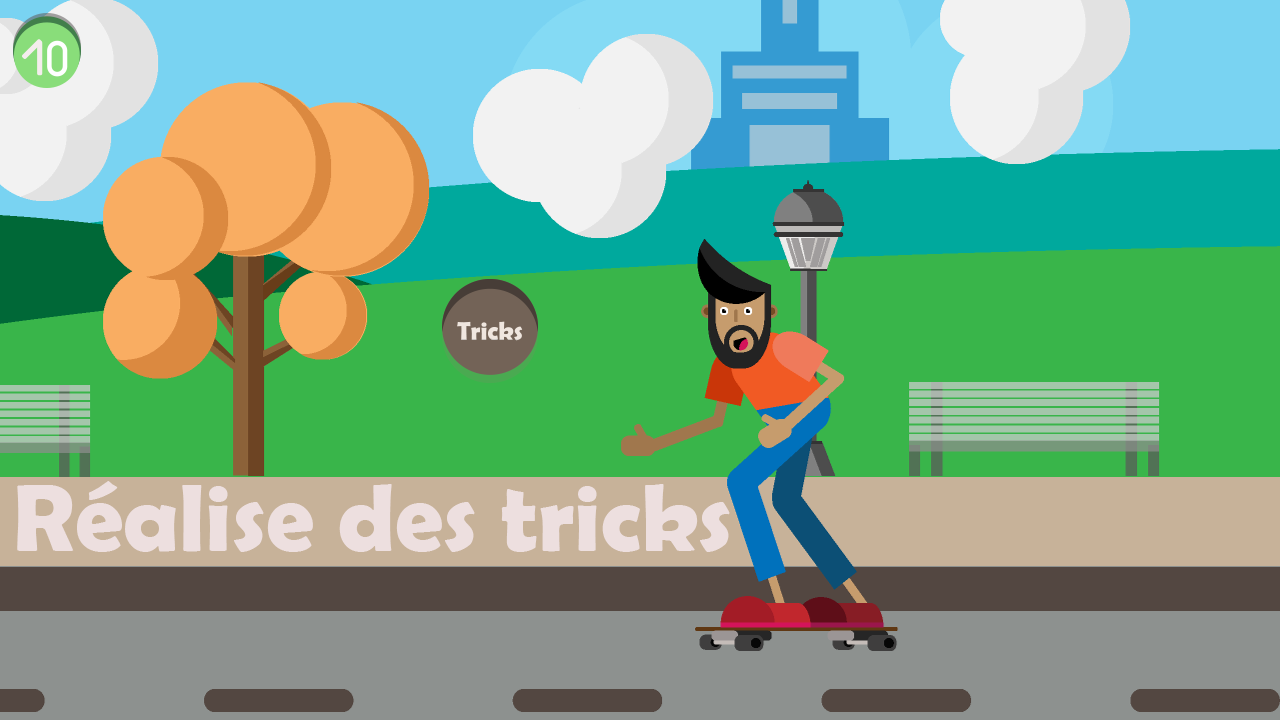
<style>
.page{position:relative;width:1280px;height:720px}
.page>*{position:absolute;margin:0}
.t1{font:96.2px "BerlinSansFBDemi-Bold";color:#eddfdf}
</style>
<div class="page">
<p class="t1" style="left:17px;top:481px;width:713px;height:71px">Réalise des tricks</p>
</div>
